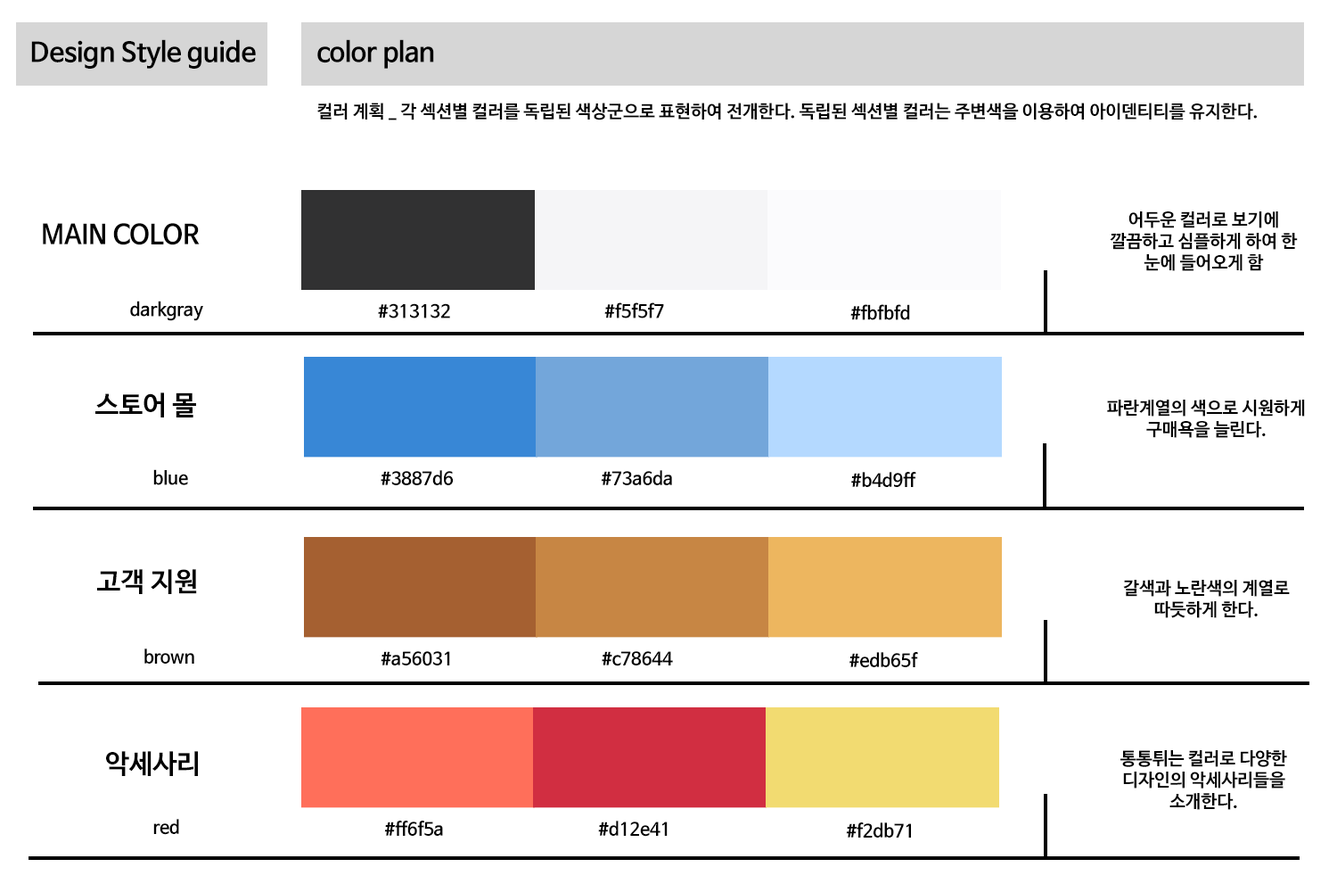
<style>
.page{position:relative;width:1337px;height:892px;background:#ffffff}
.page>*{position:absolute;margin:0}
.t1{font:26.7px "NanumBarunGothicBold";color:#000000}
.t2{font:17.8px "NanumBarunGothicBold";color:#000000}
.t3{font:26.8px "NanumBarunGothicBold";color:#000000}
</style>
<div class="page">
<p class="t1" style="left:31px;top:39px;width:225px;height:30px">Design Style guide</p>
<p class="t1" style="left:317px;top:39px;width:117px;height:30px">color plan</p>
<p class="t2" style="left:317px;top:103px;width:940px;height:17px">컬러 계획 _ 각 섹션별 컬러를 독립된 색상군으로 표현하여 전개한다. 독립된 섹션별 컬러는 주변색을 이용하여 아이덴티티를 유지한다.</p>
<p class="t2" style="left:1110px;top:211px;width:188px;height:60px;text-align:center">어두운 컬러로 보기에 깔끔하고 심플하게 하여 한 눈에 들어오게 함</p>
<p class="t1" style="left:43px;top:223px;width:157px;height:22px">MAIN COLOR</p>
<p class="t2" style="left:130px;top:300px;width:73px;height:21px">darkgray</p>
<p class="t2" style="left:378px;top:303px;width:72px;height:15px">#313132</p>
<p class="t2" style="left:605px;top:302px;width:59px;height:16px">#f5f5f7</p>
<p class="t2" style="left:851px;top:304px;width:59px;height:16px">#fbfbfd</p>
<p class="t3" style="left:95px;top:392px;width:101px;height:25px">스토어 몰</p>
<p class="t2" style="left:1107px;top:399px;width:198px;height:39px;text-align:center">파란계열의 색으로 시원하게 구매욕을 늘린다.</p>
<p class="t2" style="left:153px;top:469px;width:35px;height:16px">blue</p>
<p class="t2" style="left:381px;top:470px;width:72px;height:15px">#3887d6</p>
<p class="t2" style="left:601px;top:470px;width:71px;height:15px">#73a6da</p>
<p class="t2" style="left:851px;top:472px;width:66px;height:15px">#b4d9ff</p>
<p class="t3" style="left:97px;top:569px;width:100px;height:25px">고객 지원</p>
<p class="t2" style="left:1123px;top:580px;width:167px;height:38px;text-align:center">갈색과 노란색의 계열로 따듯하게 한다.</p>
<p class="t2" style="left:144px;top:648px;width:50px;height:15px">brown</p>
<p class="t2" style="left:381px;top:651px;width:69px;height:15px">#a56031</p>
<p class="t2" style="left:602px;top:651px;width:71px;height:15px">#c78644</p>
<p class="t2" style="left:850px;top:652px;width:68px;height:16px">#edb65f</p>
<p class="t2" style="left:1121px;top:750px;width:166px;height:60px;text-align:center">통통튀는 컬러로 다양한 디자인의 악세사리들을 소개한다.</p>
<p class="t3" style="left:106px;top:751px;width:92px;height:25px">악세사리</p>
<p class="t2" style="left:153px;top:818px;width:26px;height:17px">red</p>
<p class="t2" style="left:384px;top:820px;width:59px;height:15px">#ff6f5a</p>
<p class="t2" style="left:598px;top:820px;width:70px;height:16px">#d12e41</p>
<p class="t2" style="left:846px;top:822px;width:65px;height:15px">#f2db71</p>
</div>
